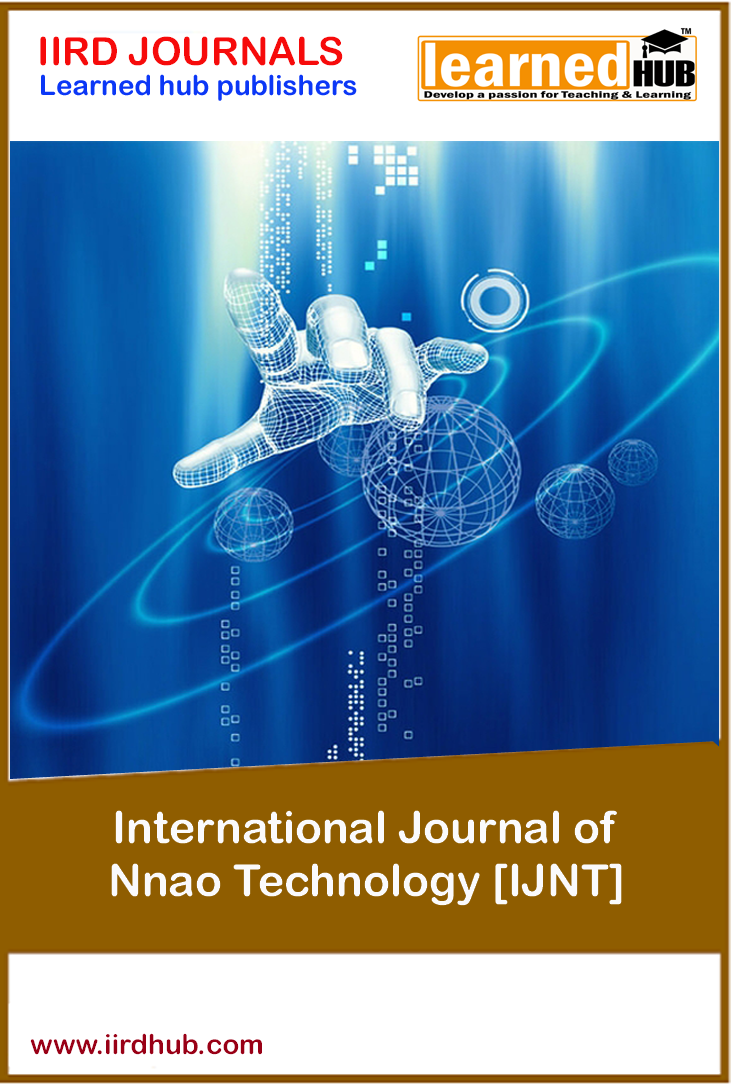
<style>
.page{position:relative;width:731px;height:1085px}
.page>*{position:absolute;margin:0}
.t1{font:38.9px "ArialRoundedMTBold";color:#f60b0b}
.t2{font:27.8px "ArialRoundedMTBold";color:#0b37f6}
.t3{font:44.4px "ArialRoundedMTBold";color:#fafafc}
.t4{font:27.8px "ArialRoundedMTBold";color:#990016}
</style>
<div class="page">
<p class="t1" style="left:40px;top:36px;width:303px;height:30px">IIRD JOURNALS</p>
<p class="t2" style="left:41px;top:74px;width:316px;height:27px">Learned hub publishers</p>
<p class="t3" style="left:111px;top:810px;width:511px;height:96px;text-align:center">International Journal of <br>Nnao Technology [IJNT]</p>
<p class="t4" style="left:30px;top:1033px;width:232px;height:22px">www.iirdhub.com</p>
</div>
